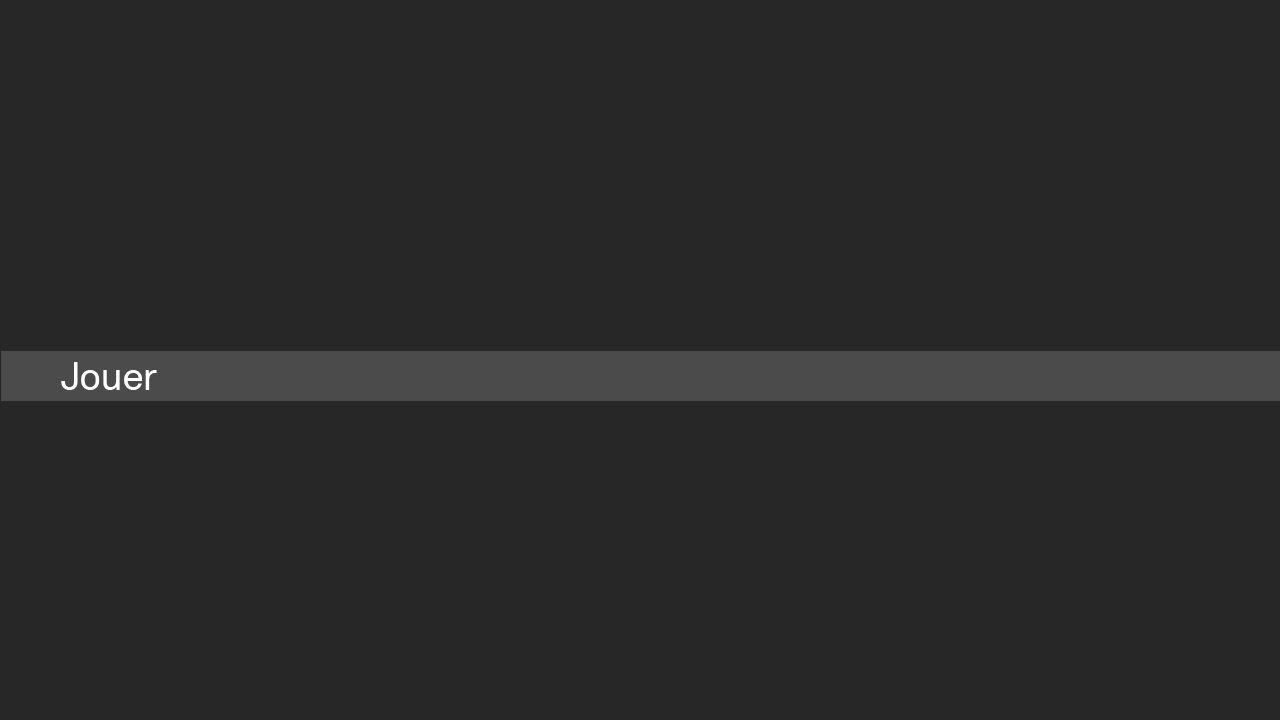
<style>
.page{position:relative;width:1280px;height:720px;background:#272727}
.page>*{position:absolute;margin:0}
.t1{font:39.9px "Akkurat";letter-spacing:-0.044em;color:#ffffff}
</style>
<div class="page">
<p class="t1" style="left:61px;top:362px;width:96px;height:28px">Jouer</p>
</div>
